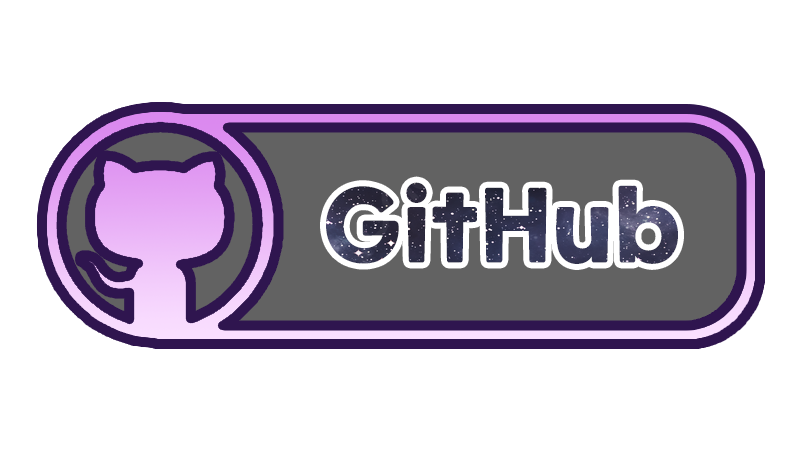
<style>
.page{position:relative;width:800px;height:450px;background:#ffffff}
.page>*{position:absolute;margin:0}
.t1{font:100px "ONEMobilePOPOTFRegular"}
</style>
<div class="page">
<p class="t1" style="left:326px;top:182px;width:352px;height:82px">GitHub</p>
</div>
